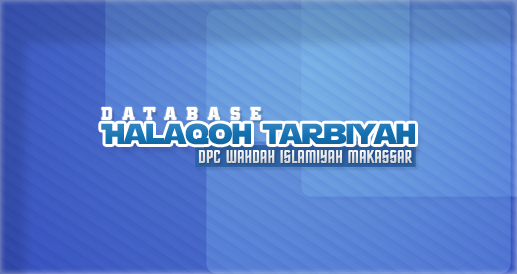
<style>
.page{position:relative;width:517px;height:274px}
.page>*{position:absolute;margin:0}
.t1{font:19.2px "SquareSlabserif711BT-Bold";letter-spacing:0.5em;color:#ffffff}
.t2{font:28.8px "StarJediLogoMonoLine";color:#1472b4}
.t3{font:19.2px "StarTrekBT-Regular";color:#e9e9e9}
</style>
<div class="page">
<p class="t1" style="left:101px;top:107px;width:160px;height:13px">DATABASE</p>
<p class="t2" style="left:101px;top:123px;width:314px;height:22px">Halaqoh Tarbiyah</p>
<p class="t3" style="left:198px;top:150px;width:215px;height:13px">DPC WAHDAH ISLAMIYAH MAKASSAR</p>
</div>
